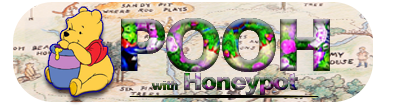
<style>
.page{position:relative;width:400px;height:105px}
.page>*{position:absolute;margin:0}
.t1{font:24px/8px "Arial-Black";letter-spacing:-0.05em}
.t2{font:72px/60px "Arial-Black";letter-spacing:-0.05em}
.t3{font:12px/60px "Arial-Black";letter-spacing:-0.05em}
.t4{font:12px/8px "Arial-Black";letter-spacing:-0.05em}
</style>
<div class="page">
<p class="t1" style="left:121px;top:18px;width:209px;height:77px;text-align:center"><span class="t2">POOH<br></span><span class="t3">w</span><span class="t4">ith </span>Honeypot</p>
</div>
